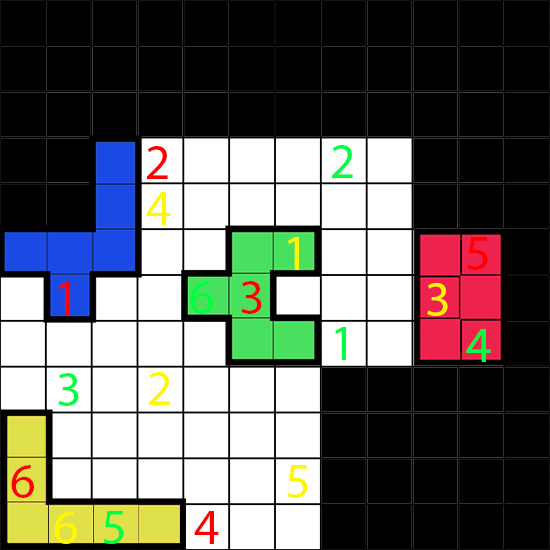
<style>
.page{position:relative;width:550px;height:550px;background:#000000}
.page>*{position:absolute;margin:0}
.t1{font:12px "MyriadPro-Regular";color:#ff0000}
.t2{font:12px "MyriadPro-Regular";color:#00ff42}
.t3{font:12px "MyriadPro-Regular";color:#fff600}
</style>
<div class="page">
<p class="t1" style="left:147px;top:146px;width:21px;height:33px">2</p>
<p class="t2" style="left:332px;top:145px;width:21px;height:33px">2</p>
<p class="t3" style="left:146px;top:192px;width:25px;height:33px">4</p>
<p class="t3" style="left:288px;top:237px;width:11px;height:33px">1</p>
<p class="t1" style="left:467px;top:237px;width:21px;height:33px">5</p>
<p class="t2" style="left:190px;top:281px;width:23px;height:33px">6</p>
<p class="t1" style="left:241px;top:281px;width:21px;height:33px">3</p>
<p class="t1" style="left:59px;top:282px;width:11px;height:33px">1</p>
<p class="t3" style="left:427px;top:283px;width:21px;height:33px">3</p>
<p class="t2" style="left:335px;top:327px;width:11px;height:33px">1</p>
<p class="t2" style="left:466px;top:329px;width:25px;height:33px">4</p>
<p class="t2" style="left:58px;top:373px;width:21px;height:33px">3</p>
<p class="t3" style="left:149px;top:372px;width:21px;height:33px">2</p>
<p class="t1" style="left:11px;top:465px;width:23px;height:33px">6</p>
<p class="t3" style="left:287px;top:465px;width:21px;height:33px">5</p>
<p class="t3" style="left:54px;top:511px;width:23px;height:33px">6</p>
<p class="t2" style="left:103px;top:511px;width:21px;height:33px">5</p>
<p class="t1" style="left:194px;top:511px;width:25px;height:33px">4</p>
</div>
